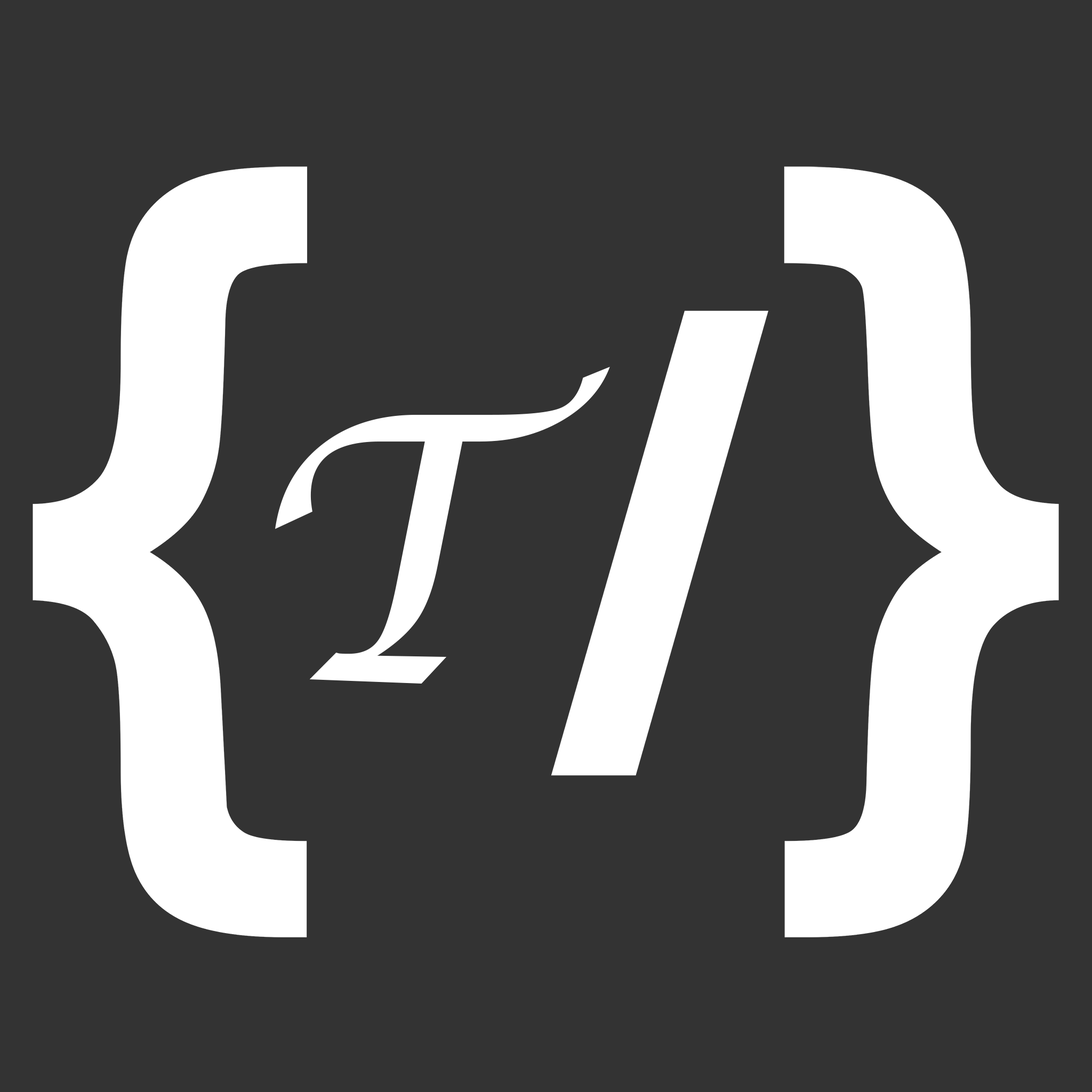
<style>
.page{position:relative;width:1092px;height:1092px;background:#333333}
.page>*{position:absolute;margin:0}
.t1{font:366.5px "LucidaCalligraphy-Italic";letter-spacing:0.075em;color:#ffffff}
</style>
<div class="page">
<p class="t1" style="left:275px;top:367px;width:335px;height:317px">T</p>
</div>
